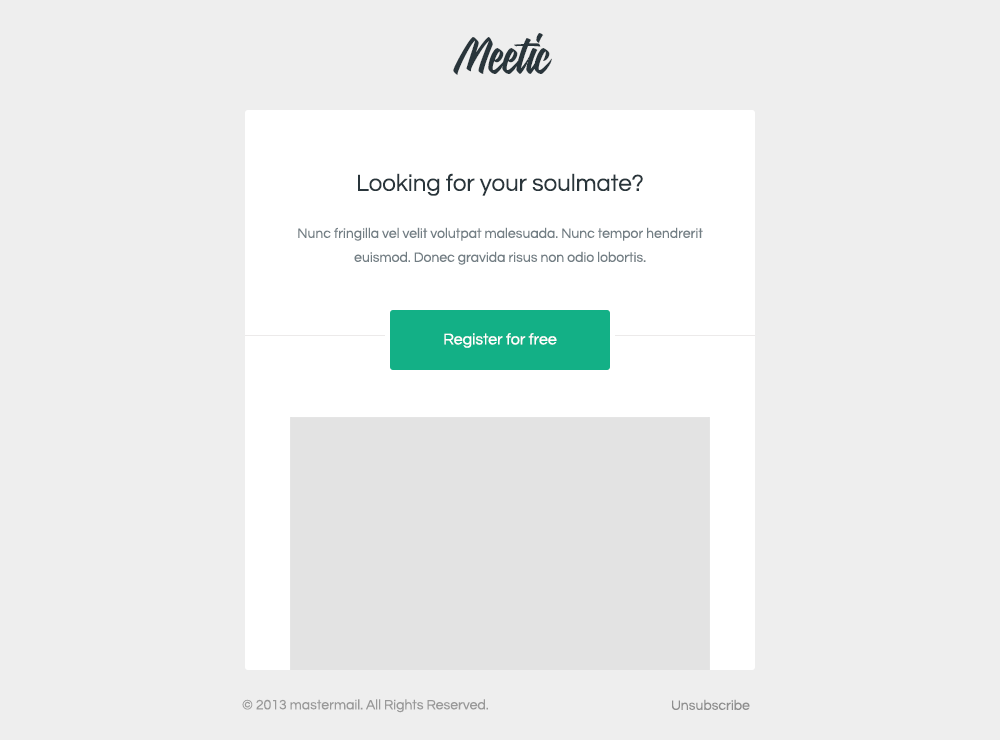
<style>
.page{position:relative;width:1000px;height:740px;background:#eeeeee}
.page>*{position:absolute;margin:0}
.t1{font:64px "Signalist";color:#29353b}
.t2{font:24px "Questrial-Regular";color:#29353b}
.t3{font:14px/24px "Questrial-Regular";color:#727e84}
.t4{font:16px "Questrial-Regular";color:#ffffff}
.t5{font:14px "Questrial-Regular";color:#8e8e8e}
</style>
<div class="page">
<p class="t1" style="left:453px;top:33px;width:99px;height:42px">Meetic</p>
<p class="t2" style="left:358px;top:173px;width:285px;height:23px">Looking for your soulmate?</p>
<p class="t3" style="left:298px;top:227px;width:405px;height:38px;text-align:center">Nunc fringilla vel velit volutpat malesuada. Nunc tempor hendrerit euismod. Donec gravida risus non odio lobortis.</p>
<p class="t4" style="left:444px;top:333px;width:113px;height:15px">Register for free</p>
<p class="t5" style="left:242px;top:699px;width:246px;height:14px;opacity:0.9">© 2013 mastermail. All Rights Reserved.</p>
<p class="t5" style="left:672px;top:699px;width:78px;height:11px">Unsubscribe</p>
</div>
